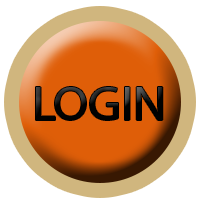
<style>
.page{position:relative;width:200px;height:200px;background:#ffffff}
.page>*{position:absolute;margin:0}
.t1{font:67.9px "MyriadArabic-Regular";scale:1.04 1}
</style>
<div class="page">
<p class="t1" style="left:36px;top:87px;width:127px;height:33px">LOGIN</p>
</div>
